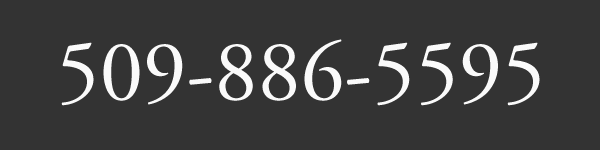
<style>
.page{position:relative;width:600px;height:150px;background:#333333}
.page>*{position:absolute;margin:0}
.t1{font:86.8px "AGaramondPro-Regular";color:#fafafa}
</style>
<div class="page">
<p class="t1" style="left:61px;top:39px;width:479px;height:67px">509-886-5595</p>
</div>
